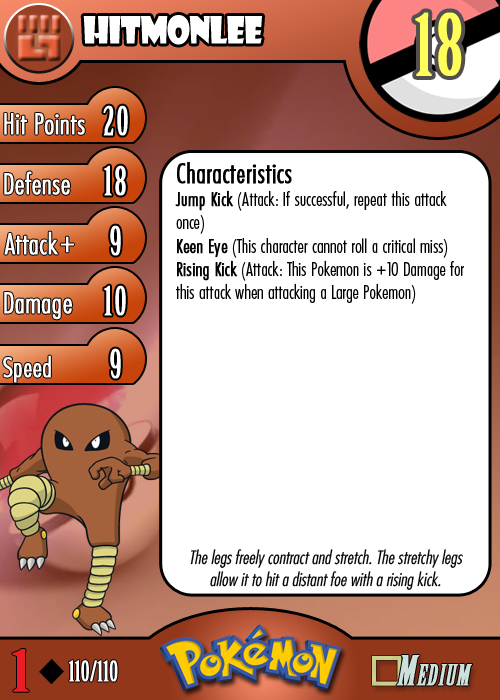
<style>
.page{position:relative;width:500px;height:700px;background:#ffffff}
.page>*{position:absolute;margin:0}
.t1{font:36.7px "ShowcardGothic-Reg";letter-spacing:-0.025em;color:#ffffff;scale:0.91 1}
.t2{font:83.3px "BirchStd";letter-spacing:0.025em;color:#fffd59;font-weight:bold}
.t3{font:27.8px "Futura-CondensedLight";color:#ffffff;font-weight:bold}
.t4{font:38.9px "BirchStd";letter-spacing:0.035em;color:#ffffff;font-weight:bold}
.t5{font:19.4px "FuturaCondensedBQ-Light";color:#010101}
.t6{font:27.8px "FuturaCondensedBQ-Light";color:#010101;font-weight:bold}
.t7{font:19.4px "FuturaCondensedBQ-Light";color:#010101;font-weight:bold}
.t8{font:30.6px "Futura-CondensedLight";color:#ffffff;font-weight:bold}
.t9{font:27.8px "FuturaCondensedBQ-Light";color:#ffffff;font-weight:bold}
.t10{font:18.1px "Futura-CondensedLight";color:#010101;font-style:italic}
.t11{font:55.6px "BirchStd";color:#ed1c24;font-weight:bold;scale:1.5 1}
.t12{font:27.8px "BirchStd";color:#ffffff;font-weight:bold}
</style>
<div class="page">
<p class="t1" style="left:83px;top:15px;width:179px;height:30px">hitmonlee</p>
<p class="t2" style="left:415px;top:12px;width:47px;height:64px">18</p>
<p class="t3" style="left:4px;top:113px;width:81px;height:22px">Hit Points</p>
<p class="t4" style="left:103px;top:105px;width:25px;height:31px">20</p>
<p class="t3" style="left:4px;top:171px;width:66px;height:24px">Defense</p>
<p class="t4" style="left:104px;top:165px;width:22px;height:31px">18</p>
<p class="t5" style="left:175px;top:162px;width:289px;height:142px"><span class="t6">Characteristics<br></span><span class="t7">Jump Kick</span> (Attack: If successful, repeat this attack once)<br><span class="t7">Keen Eye</span> (This character cannot roll a critical miss)<br><span class="t7">Rising Kick</span> (Attack: This Pokemon is +10 Damage for this attack when attacking a Large Pokemon)</p>
<p class="t3" style="left:4px;top:231px;width:54px;height:24px">Attack</p>
<p class="t4" style="left:110px;top:225px;width:11px;height:31px">9</p>
<p class="t8" style="left:60px;top:236px;width:14px;height:17px">+</p>
<p class="t3" style="left:4px;top:292px;width:68px;height:28px">Damage</p>
<p class="t4" style="left:104px;top:285px;width:22px;height:31px">10</p>
<p class="t4" style="left:110px;top:348px;width:11px;height:31px">9</p>
<p class="t9" style="left:3px;top:355px;width:48px;height:28px">Speed</p>
<p class="t10" style="left:190px;top:549px;width:273px;height:41px;text-align:center">The legs freely contract and stretch. The stretchy legs allow it to hit a distant foe with a rising kick.</p>
<p class="t11" style="left:12px;top:649px;width:17px;height:43px">1</p>
<p class="t12" style="left:68px;top:660px;width:50px;height:22px">110/110</p>
</div>
